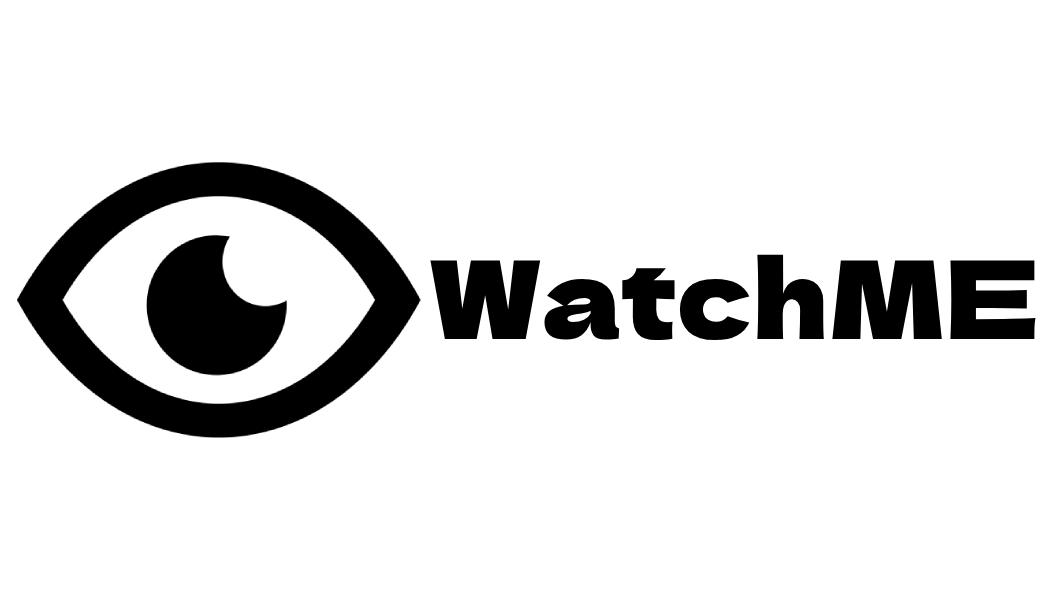
<style>
.page{position:relative;width:1050px;height:600px;background:#ffffff}
.page>*{position:absolute;margin:0}
.t1{font:108px "DelaGothicOne-Regular";color:#000000}
</style>
<div class="page">
<p class="t1" style="left:430px;top:254px;width:606px;height:87px">WatchME</p>
</div>
